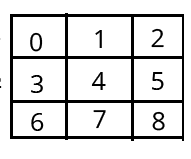
<style>
.page{position:relative;width:191px;height:159px;background:#ffffff}
.page>*{position:absolute;margin:0}
.t1{font:25px "OpenSans-Regular";color:#000000}
</style>
<div class="page">
<p class="t1" style="left:95px;top:30px;width:7px;height:18px">1</p>
<p class="t1" style="left:151px;top:28px;width:13px;height:20px">2</p>
<p class="t1" style="left:30px;top:32px;width:13px;height:20px">0</p>
<p class="t1" style="left:31px;top:75px;width:12px;height:18px">3</p>
<p class="t1" style="left:91px;top:72px;width:15px;height:18px">4</p>
<p class="t1" style="left:152px;top:72px;width:12px;height:18px">5</p>
<p class="t1" style="left:31px;top:113px;width:13px;height:18px">6</p>
<p class="t1" style="left:93px;top:110px;width:13px;height:19px">7</p>
<p class="t1" style="left:152px;top:111px;width:13px;height:20px">8</p>
</div>
